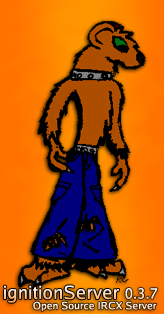
<style>
.page{position:relative;width:164px;height:314px}
.page>*{position:absolute;margin:0}
.t1{font:18px "LuxiSans";letter-spacing:0.025em}
.t2{font:14px "LuxiSans";letter-spacing:0.025em}
.t3{font:10px "LuxiSans";letter-spacing:0.025em;color:#feedde}
</style>
<div class="page">
<p class="t1" style="left:4px;top:285px;width:115px;height:18px">ignitionServer</p>
<p class="t2" style="left:125px;top:288px;width:33px;height:11px">0.3.7</p>
<p class="t3" style="left:33px;top:301px;width:124px;height:11px">Open Source IRCX Server</p>
</div>
